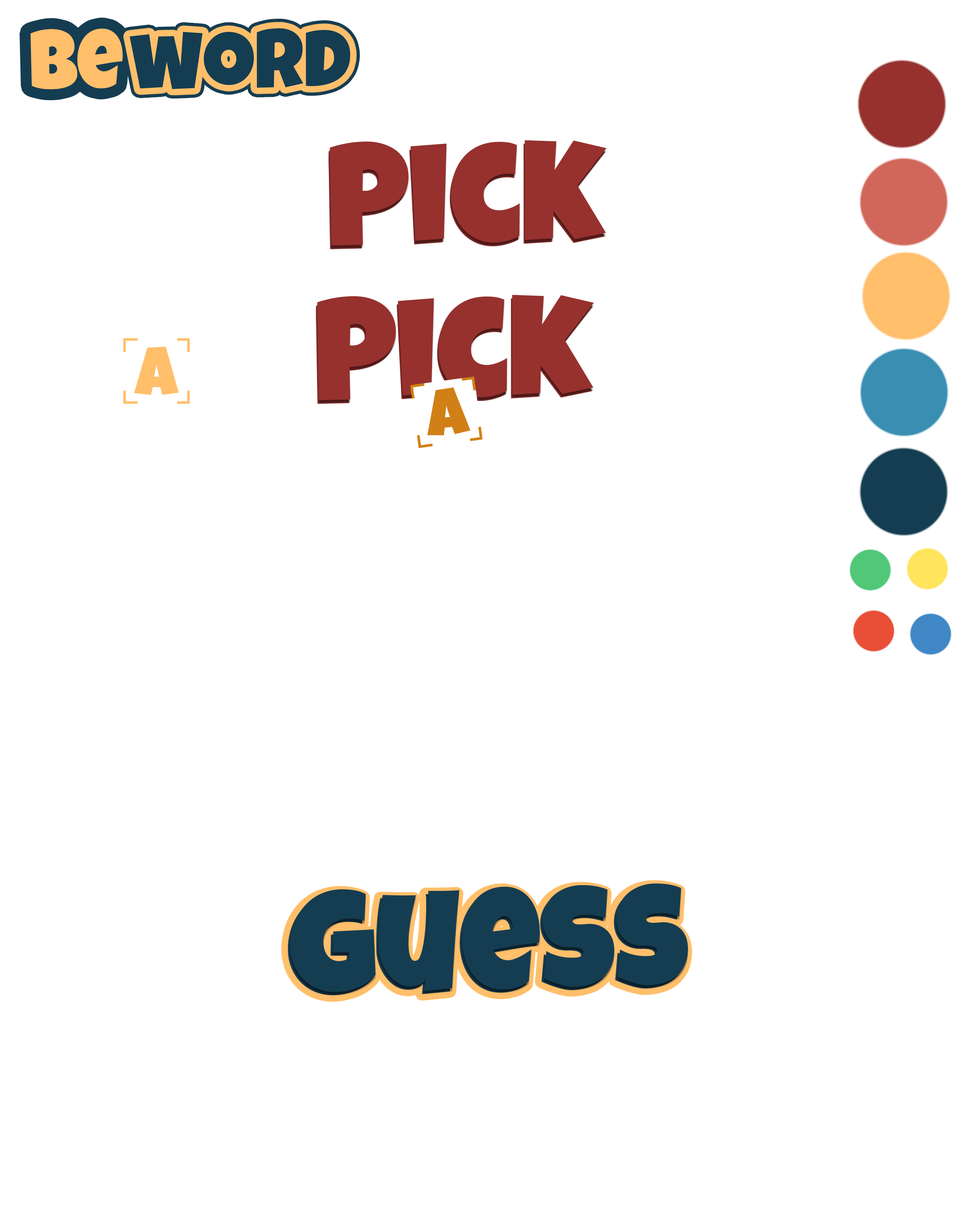
<style>
.page{position:relative;width:977px;height:1221px;background:#ffffff}
.page>*{position:absolute;margin:0}
.t1{font:83.1px "LuckiestGuy-Regular";color:#ffbf6b}
.t2{font:142.8px "LuckiestGuy-Regular";color:#96312e}
.t3{font:69.9px "LuckiestGuy-Regular";color:#ffbf6b}
.t4{font:67.7px "LuckiestGuy-Regular";color:#d08016}
.t5{font:142.8px "LuckiestGuy-Regular";color:#153d52}
</style>
<div class="page">
<p class="t1" style="left:31px;top:28px;width:92px;height:62px;rotate:-1deg">Be</p>
<p class="t2" style="left:328px;top:144px;width:277px;height:105px;rotate:-1deg">Pick</p>
<p class="t2" style="left:330px;top:140px;width:276px;height:106px;rotate:-1deg">Pick</p>
<p class="t2" style="left:316px;top:298px;width:277px;height:106px;rotate:-1deg">Pick</p>
<p class="t2" style="left:317px;top:295px;width:277px;height:105px;rotate:-1deg">Pick</p>
<p class="t3" style="left:134px;top:346px;width:45px;height:49px">A</p>
<p class="t4" style="left:427px;top:387px;width:43px;height:48px;rotate:-6deg">A</p>
<p class="t5" style="left:288px;top:886px;width:397px;height:109px;rotate:-1deg">guess</p>
<p class="t5" style="left:290px;top:883px;width:398px;height:109px;rotate:-1deg">guess</p>
</div>
